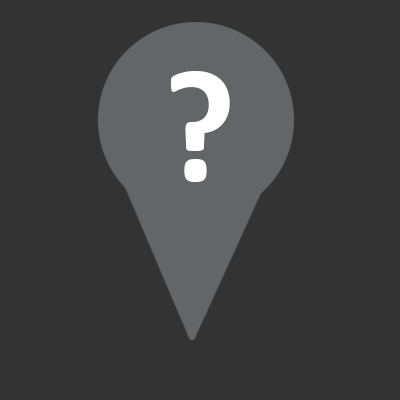
<style>
.page{position:relative;width:400px;height:400px;background:#333333}
.page>*{position:absolute;margin:0}
.t1{font:159.6px "Calibri-Bold";color:#ffffff}
</style>
<div class="page">
<p class="t1" style="left:170px;top:71px;width:60px;height:111px">?</p>
</div>
